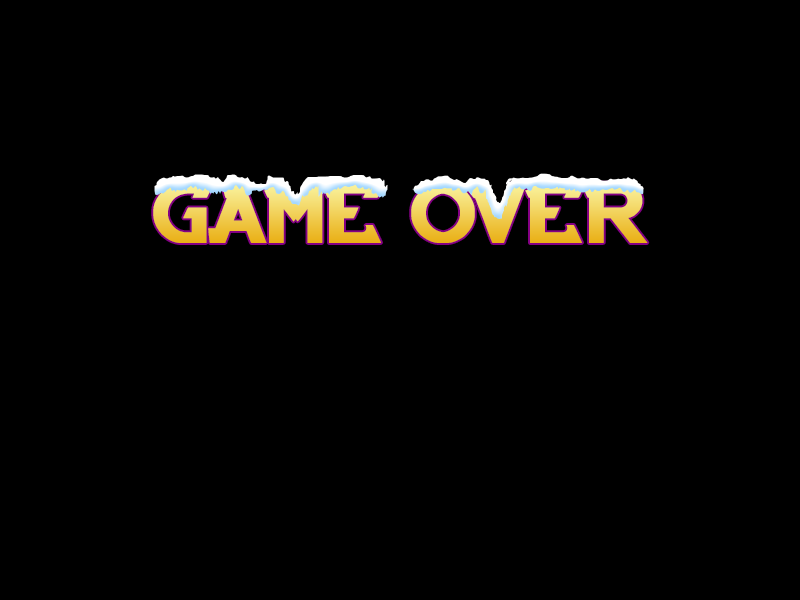
<style>
.page{position:relative;width:800px;height:600px;background:#000000}
.page>*{position:absolute;margin:0}
.t1{font:92.5px "ARCADE"}
</style>
<div class="page">
<p class="t1" style="left:153px;top:182px;width:495px;height:61px">game over</p>
</div>
